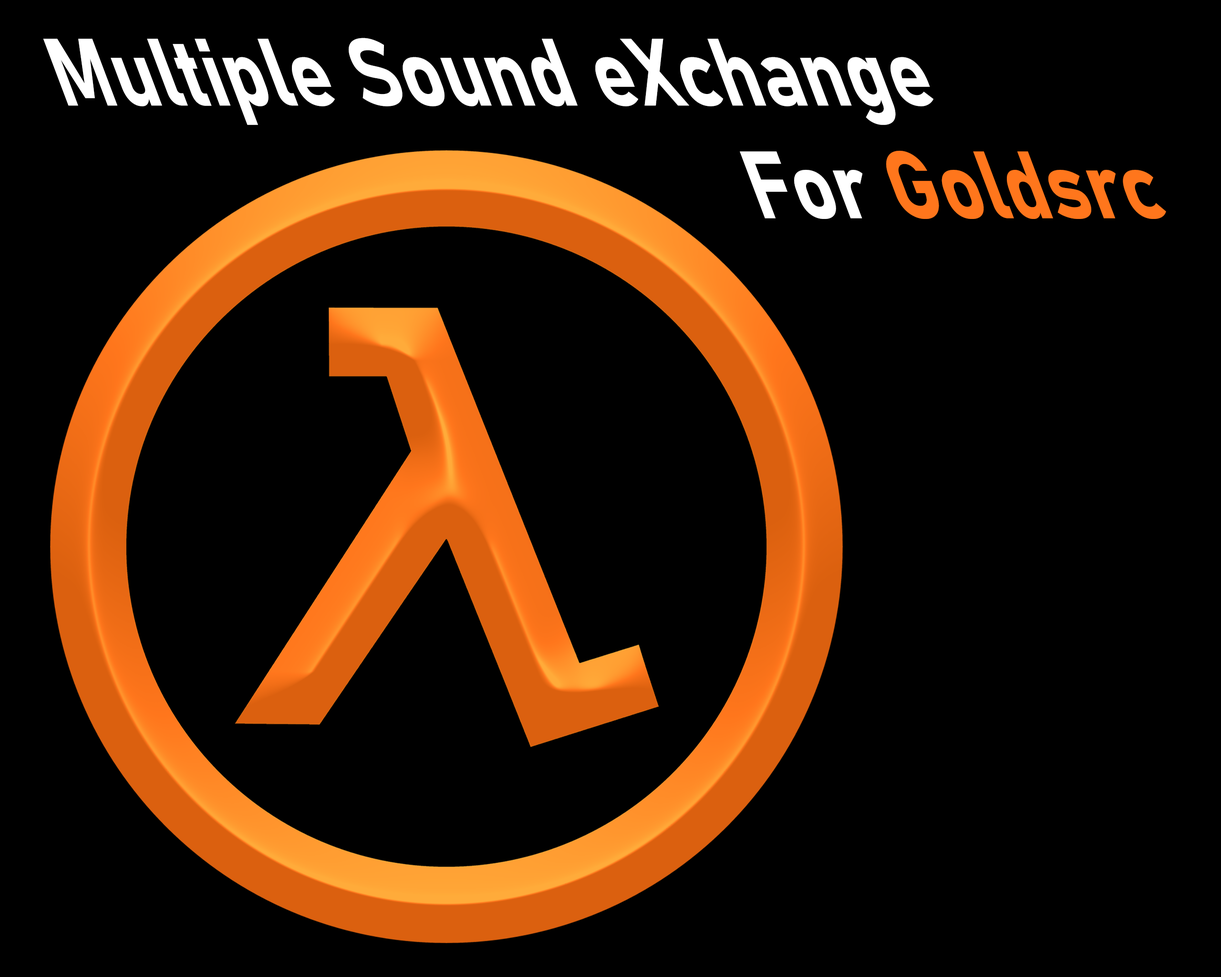
<style>
.page{position:relative;width:1221px;height:977px;background:#000000}
.page>*{position:absolute;margin:0}
.t1{font:100.4px "Bahnschrift-Bold";color:#ffffff;scale:0.78 1}
.t2{font:100.4px "Bahnschrift-Bold";color:#ff761c;scale:0.78 1}
</style>
<div class="page">
<p class="t1" style="left:43px;top:38px;width:1123px;height:181px;text-align:center">Multiple Sound eXchange<br>                                        For <span class="t2">Goldsrc</span></p>
</div>
